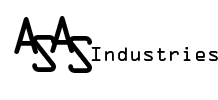
<style>
.page{position:relative;width:218px;height:100px;background:#ffffff}
.page>*{position:absolute;margin:0}
.t1{font:48px "OCRAStd";color:#000000}
.t2{font:18px "OCRAStd";color:#000000}
</style>
<div class="page">
<p class="t1" style="left:14px;top:17px;width:24px;height:37px">A</p>
<p class="t1" style="left:50px;top:16px;width:24px;height:37px">A</p>
<p class="t1" style="left:32px;top:35px;width:24px;height:37px">S</p>
<p class="t1" style="left:68px;top:36px;width:24px;height:37px">S</p>
<p class="t2" style="left:91px;top:47px;width:127px;height:14px">Industries</p>
</div>
